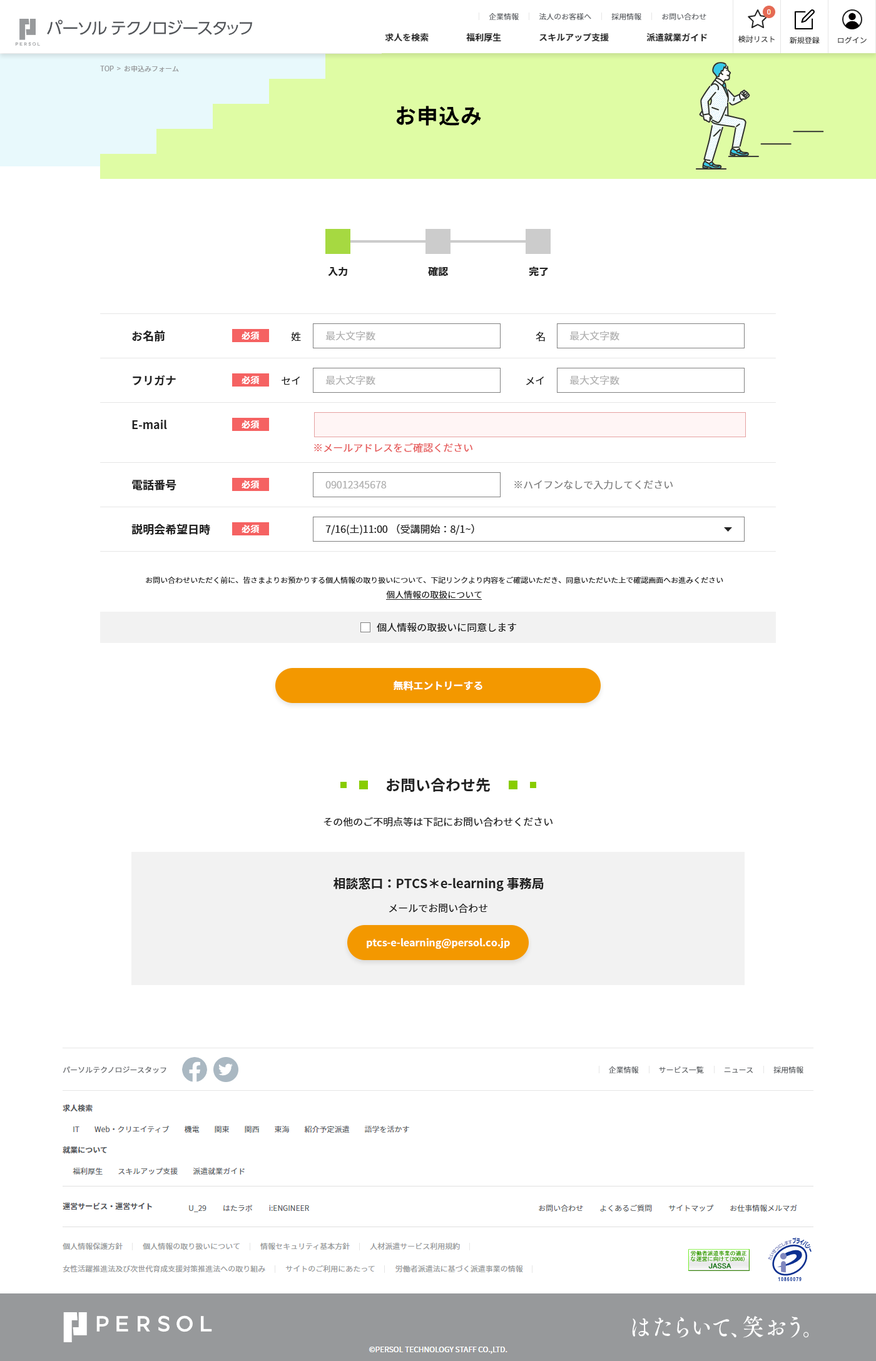
<style>
.page{position:relative;width:876px;height:1361px;background:#ffffff}
.page>*{position:absolute;margin:0}
.t1{font:6.9px "NotoSansJP-Regular";color:#97999b}
.t2{font:21.3px "NotoSansJP-Bold";letter-spacing:0.05em;color:#000000}
.t3{font:10px "NotoSansJP-Bold";color:#222222}
.t4{font:11.3px "NotoSansJP-Bold";color:#222222}
.t5{font:8.8px "NotoSansJP-Bold";color:#ffffff}
.t6{font:10px "NotoSansJP-Regular";color:#222222}
.t7{font:10px "NotoSansJP-Regular";color:#b3b3b3}
.t8{font:10px "NotoSansJP-Regular";color:#e65c5c}
.t9{font:10px "NotoSansJP-Regular";color:#808080}
.t10{font:7.5px "NotoSansJP-Regular";color:#222222}
.t11{font:8.8px "NotoSansJP-Regular";color:#222222}
.t12{font:10px "NotoSansJP-Bold";color:#ffffff}
.t13{font:15px "NotoSansJP-Bold";color:#222222}
.t14{font:12.5px "NotoSansJP-Bold";color:#222222}
</style>
<div class="page">
<p class="t1" style="left:100px;top:65px;width:79px;height:7px">TOP  &gt;  お申込みフォーム</p>
<p class="t2" style="left:396px;top:106px;width:85px;height:20px">お申込み</p>
<p class="t3" style="left:328px;top:267px;width:19px;height:10px">入力</p>
<p class="t3" style="left:428px;top:267px;width:20px;height:10px">確認</p>
<p class="t3" style="left:529px;top:267px;width:19px;height:10px">完了</p>
<p class="t4" style="left:132px;top:330px;width:33px;height:12px">お名前</p>
<p class="t5" style="left:241px;top:332px;width:18px;height:8px">必須</p>
<p class="t6" style="left:291px;top:332px;width:10px;height:10px">姓</p>
<p class="t7" style="left:325px;top:331px;width:50px;height:10px">最大文字数</p>
<p class="t6" style="left:536px;top:332px;width:9px;height:10px">名</p>
<p class="t7" style="left:569px;top:331px;width:50px;height:10px">最大文字数</p>
<p class="t4" style="left:133px;top:375px;width:43px;height:11px">フリガナ</p>
<p class="t5" style="left:241px;top:376px;width:18px;height:8px">必須</p>
<p class="t6" style="left:282px;top:377px;width:18px;height:8px">セイ</p>
<p class="t7" style="left:325px;top:375px;width:50px;height:10px">最大文字数</p>
<p class="t6" style="left:526px;top:377px;width:18px;height:8px">メイ</p>
<p class="t7" style="left:569px;top:375px;width:50px;height:10px">最大文字数</p>
<p class="t4" style="left:132px;top:420px;width:35px;height:9px">E-mail</p>
<p class="t5" style="left:241px;top:420px;width:18px;height:9px">必須</p>
<p class="t8" style="left:314px;top:443px;width:158px;height:10px">※メールアドレスをご確認ください</p>
<p class="t4" style="left:132px;top:480px;width:44px;height:11px">電話番号</p>
<p class="t5" style="left:241px;top:480px;width:18px;height:9px">必須</p>
<p class="t7" style="left:325px;top:481px;width:62px;height:8px">09012345678</p>
<p class="t9" style="left:514px;top:480px;width:159px;height:10px">※ハイフンなしで入力してください</p>
<p class="t4" style="left:131px;top:524px;width:79px;height:12px">説明会希望日時</p>
<p class="t5" style="left:241px;top:525px;width:18px;height:8px">必須</p>
<p class="t6" style="left:325px;top:524px;width:149px;height:12px">7/16(土)11:00 （受講開始：8/1~）</p>
<p class="t10" style="left:146px;top:577px;width:577px;height:7px">お問い合わせいただく前に、皆さまよりお預かりする個人情報の取り扱いについて、下記リンクより内容をご確認いただき、同意いただいた上で確認画面へお進みください</p>
<p class="t11" style="left:386px;top:591px;width:96px;height:8px">個人情報の取扱について</p>
<p class="t6" style="left:377px;top:623px;width:139px;height:10px">個人情報の取扱いに同意します</p>
<p class="t12" style="left:394px;top:681px;width:88px;height:10px">無料エントリーする</p>
<p class="t13" style="left:387px;top:778px;width:103px;height:15px">お問い合わせ先</p>
<p class="t6" style="left:323px;top:817px;width:229px;height:10px">その他のご不明点等は下記にお問い合わせください</p>
<p class="t14" style="left:333px;top:877px;width:211px;height:15px">相談窓口：PTCS＊e-learning事務局</p>
<p class="t6" style="left:389px;top:903px;width:98px;height:10px">メールでお問い合わせ</p>
<p class="t12" style="left:367px;top:938px;width:143px;height:11px">ptcs-e-learning@persol.co.jp</p>
</div>
